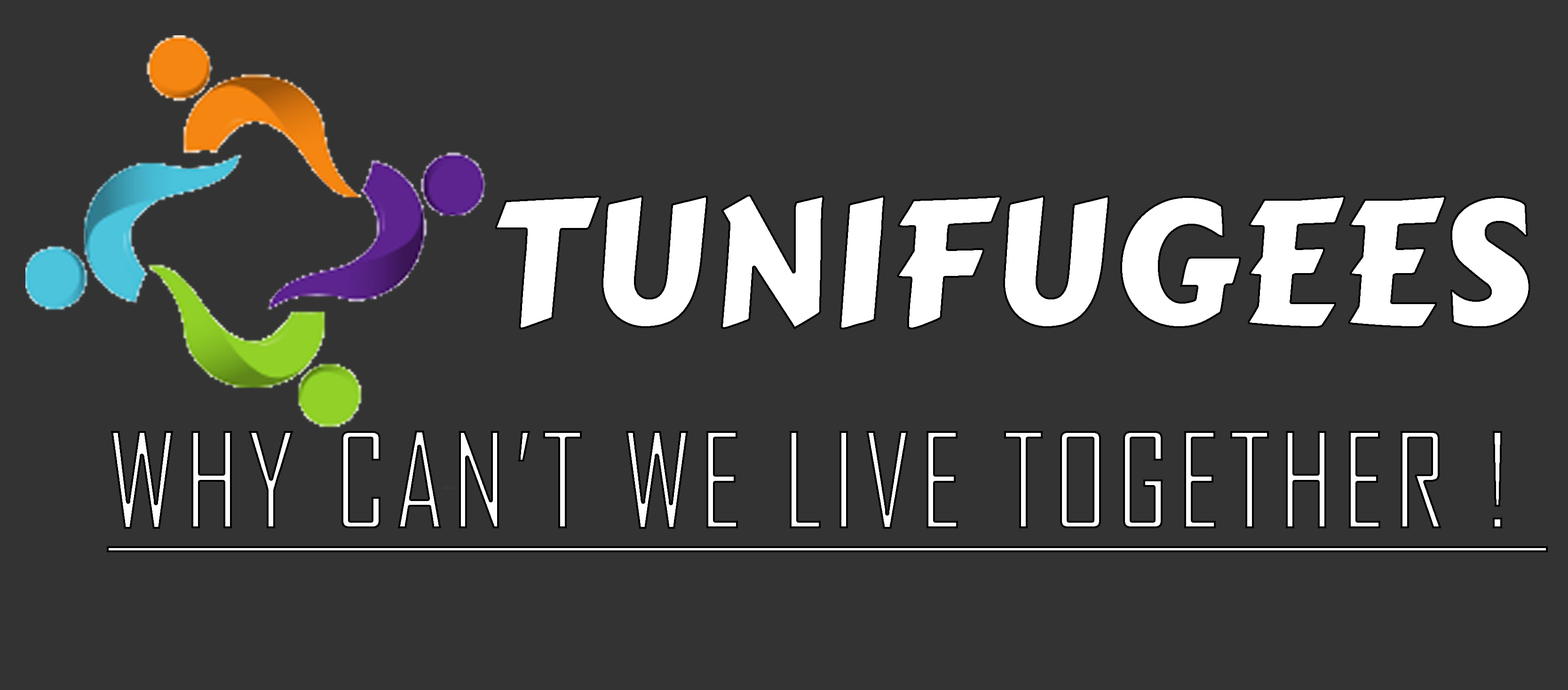
<style>
.page{position:relative;width:1568px;height:690px;background:#333333}
.page>*{position:absolute;margin:0}
.t1{font:177.6px "CarterOne";color:#ffffff;text-transform:uppercase}
.t2{font:127.4px "AgencyFB-Reg";letter-spacing:0.05em;text-transform:uppercase;text-decoration:underline}
</style>
<div class="page">
<p class="t1" style="left:495px;top:195px;width:1035px;height:135px">tunifugees</p>
<p class="t2" style="left:107px;top:431px;width:1441px;height:122px">WHY CAN’t we live together !</p>
</div>
